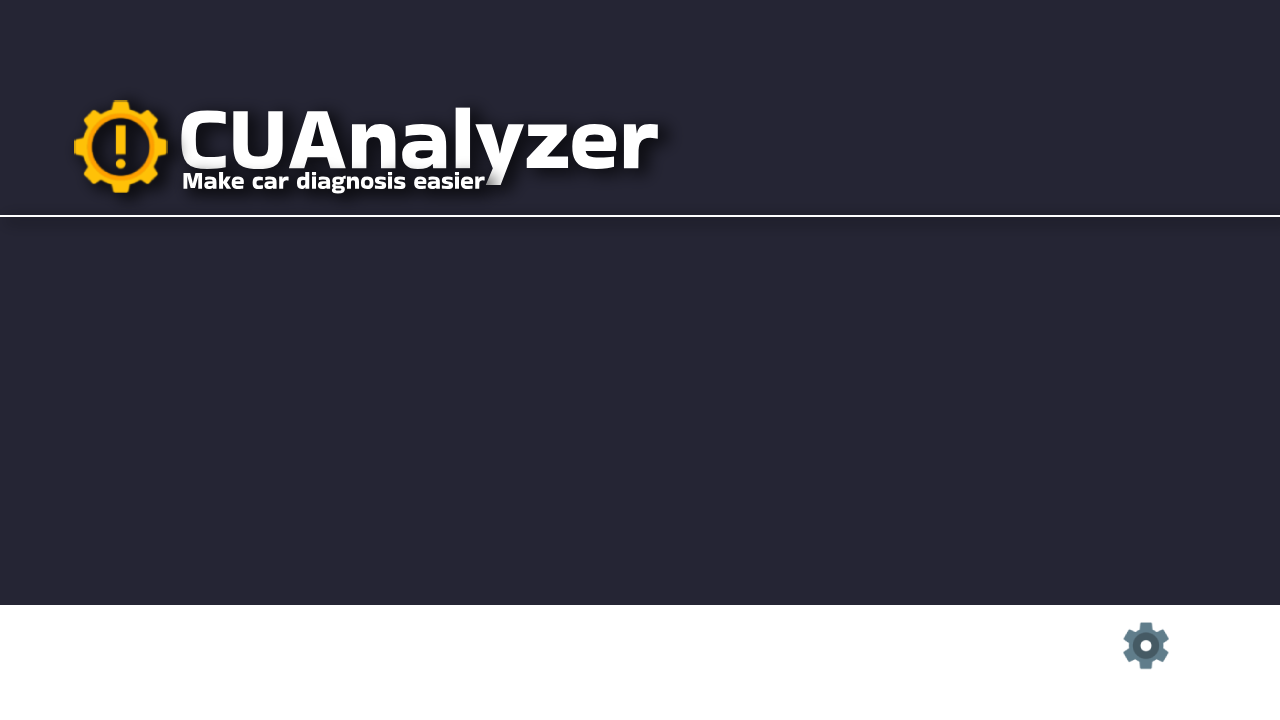
<style>
.page{position:relative;width:1280px;height:720px;background:#252534}
.page>*{position:absolute;margin:0}
.t1{font:90px "BakbakOne-Regular";color:#ffffff}
.t2{font:25px "BakbakOne-Regular";color:#ffffff}
</style>
<div class="page">
<p class="t1" style="left:181px;top:107px;width:477px;height:78px">CUAnalyzer</p>
<p class="t2" style="left:183px;top:171px;width:302px;height:23px">Make car diagnosis easier</p>
</div>
